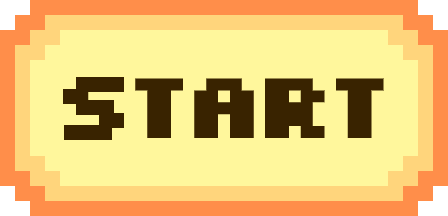
<style>
.page{position:relative;width:448px;height:216px;background:#fff79c}
.page>*{position:absolute;margin:0}
.t1{font:100px "Silkscreen-Bold";letter-spacing:-0.125em;color:#392300}
</style>
<div class="page">
<p class="t1" style="left:64px;top:78px;width:320px;height:60px">start</p>
</div>
